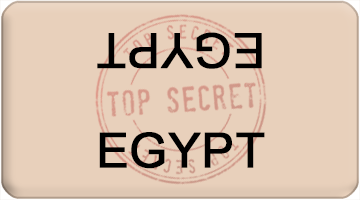
<style>
.page{position:relative;width:360px;height:200px;background:#e8d0bb}
.page>*{position:absolute;margin:0}
.t1{font:48px "ArialMT";color:#000000;font-weight:bold}
</style>
<div class="page">
<p class="t1" style="left:97px;top:32px;width:165px;height:37px;rotate:180deg">EGYPT</p>
<p class="t1" style="left:99px;top:132px;width:166px;height:37px">EGYPT</p>
</div>
